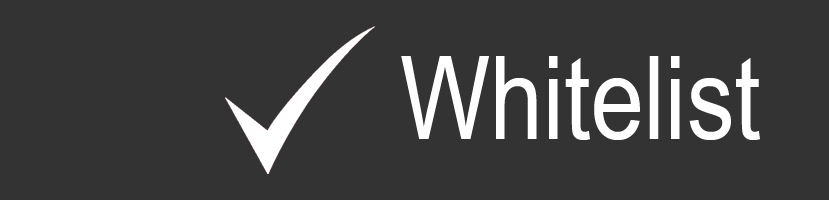
<style>
.page{position:relative;width:829px;height:200px;background:#333333}
.page>*{position:absolute;margin:0}
.t1{font:116.5px "ArialNarrow";color:#ffffff}
</style>
<div class="page">
<p class="t1" style="left:401px;top:56px;width:359px;height:84px">Whitelist</p>
</div>
